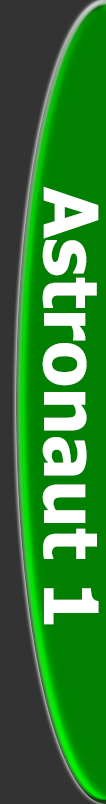
<style>
.page{position:relative;width:106px;height:804px;background:#007f00}
.page>*{position:absolute;margin:0}
.t1{font:75px "Tahoma-Bold";color:#ffffff}
</style>
<div class="page">
<p class="t1" style="left:42px;top:186px;width:57px;height:439px;rotate:90deg">Astronaut 1</p>
</div>
